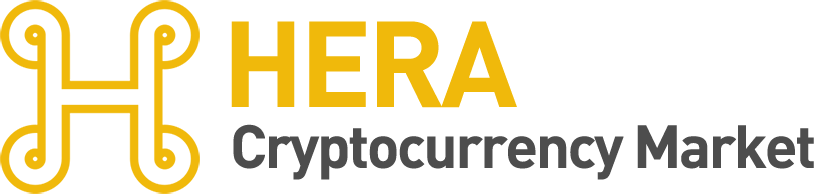
<style>
.page{position:relative;width:814px;height:194px;background:#ffffff}
.page>*{position:absolute;margin:0}
.t1{font:120px "Dinbol";letter-spacing:-0.04em;color:#f0b90b;text-transform:uppercase}
.t2{font:60px "Dinbol";letter-spacing:-0.04em;color:#4d4d4d}
</style>
<div class="page">
<p class="t1" style="left:231px;top:21px;width:286px;height:87px">HERA</p>
<p class="t2" style="left:233px;top:124px;width:581px;height:56px">Cryptocurrency Market</p>
</div>
